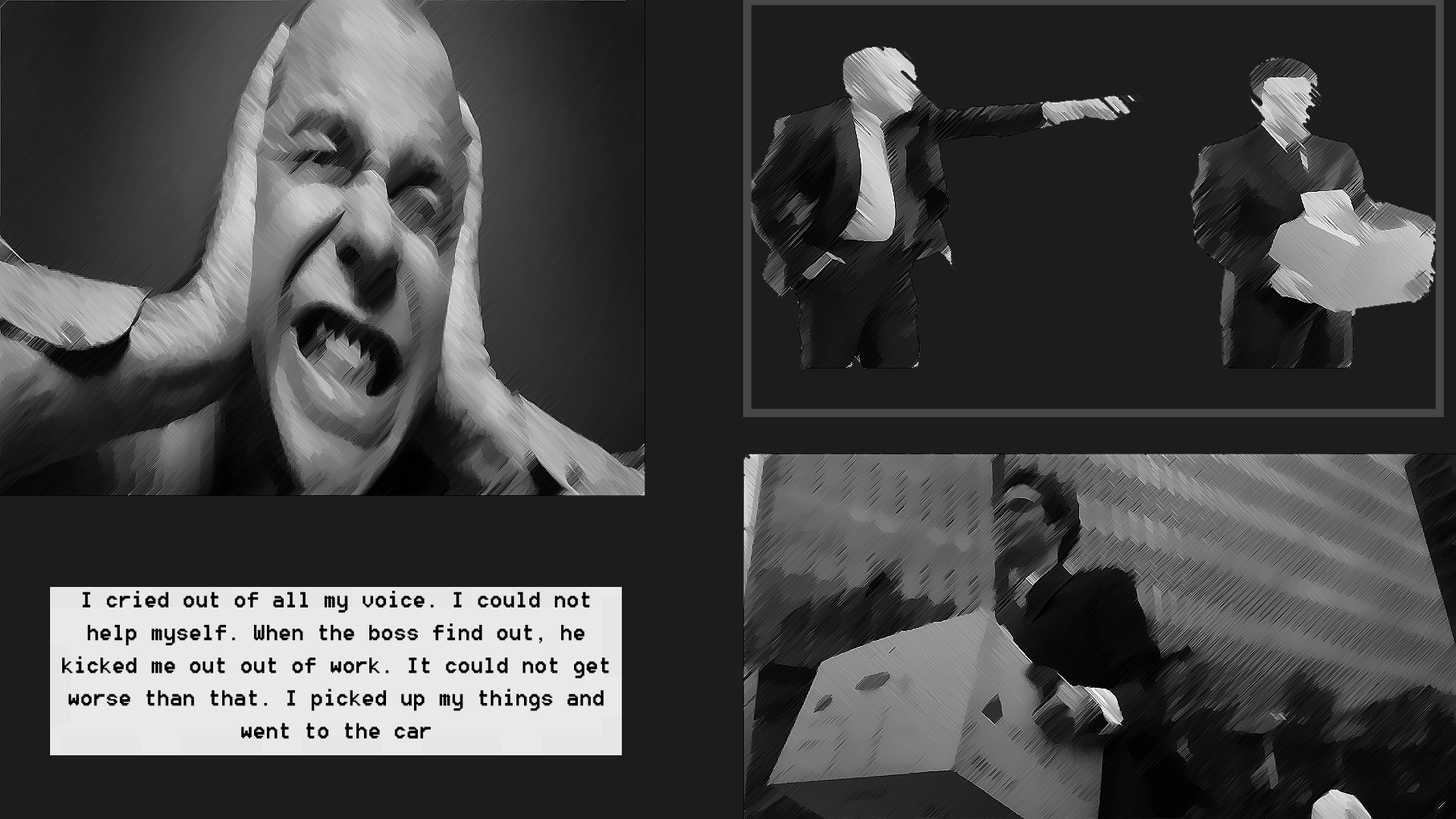
<style>
.page{position:relative;width:1456px;height:819px;background:#1c1c1c}
.page>*{position:absolute;margin:0}
.t1{font:27.3px "8514oem";color:#000000}
</style>
<div class="page">
<p class="t1" style="left:62px;top:591px;width:547px;height:148px;text-align:center">I cried out of all my voice. I could not help myself. When the boss find out, he kicked me out out of work. It could not get worse than that. I picked up my things and went to the car</p>
</div>
